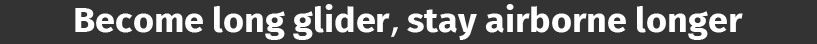
<style>
.page{position:relative;width:817px;height:44px;background:#333333}
.page>*{position:absolute;margin:0}
.t1{font:34.2px "FiraSans-Bold";color:#ffffff;scale:1.05 1}
.t2{font:34.2px "AdobeHeitiStd-Regular";color:#ffffff;scale:1.05 1}
</style>
<div class="page">
<p class="t1" style="left:75px;top:4px;width:668px;height:36px">Become long glider<span class="t2">, </span>stay airborne longer</p>
</div>
